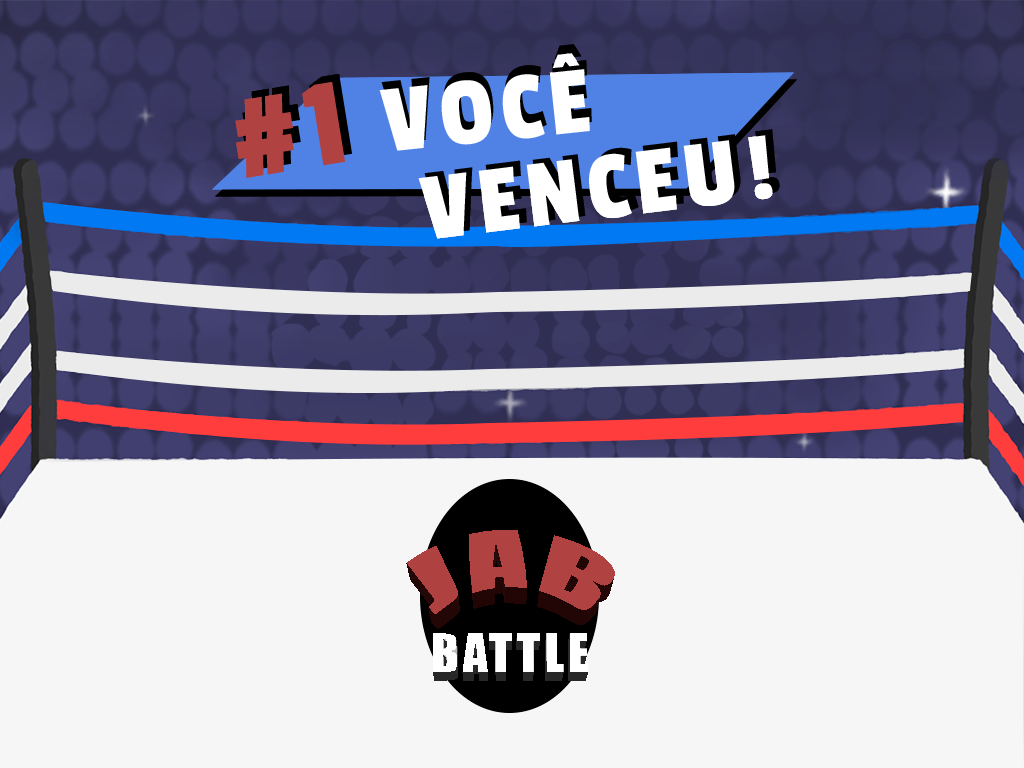
<style>
.page{position:relative;width:1024px;height:768px;background:#f6f6f6}
.page>*{position:absolute;margin:0}
.t1{font:100px "PassionOne-Regular";letter-spacing:0.075em;color:#ffffff}
.t2{font:100px "PassionOne-Regular";letter-spacing:0.075em}
.t3{font:130px "PassionOne-Regular";letter-spacing:0.075em}
.t4{font:130px "PassionOne-Regular";letter-spacing:0.075em;color:#b04242}
</style>
<div class="page">
<p class="t1" style="left:379px;top:53px;width:211px;height:98px;rotate:-6deg">VOCÊ</p>
<p class="t2" style="left:381px;top:44px;width:211px;height:99px;rotate:-6deg">VOCÊ</p>
<p class="t3" style="left:242px;top:74px;width:110px;height:96px;rotate:-9deg">#1</p>
<p class="t4" style="left:235px;top:82px;width:110px;height:96px;rotate:-9deg">#1</p>
<p class="t1" style="left:418px;top:135px;width:355px;height:104px;rotate:-7deg">VENCEU!</p>
</div>
